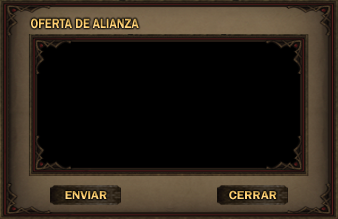
<style>
.page{position:relative;width:338px;height:219px;background:#000000}
.page>*{position:absolute;margin:0}
.t1{font:14px "FranklinGothic-Demi";scale:0.86 1}
.t2{font:12px "FranklinGothic-Demi";scale:1.07 1}
</style>
<div class="page">
<p class="t1" style="left:31px;top:18px;width:108px;height:11px">OFERTA DE ALIANZA</p>
<p class="t2" style="left:65px;top:191px;width:42px;height:8px">ENVIAR</p>
<p class="t2" style="left:229px;top:190px;width:48px;height:10px">CERRAR</p>
</div>
